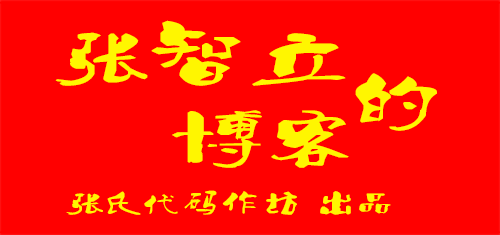
<style>
.page{position:relative;width:500px;height:235px;background:#ff0000}
.page>*{position:absolute;margin:0}
.t1{font:60px "Ò¶¸ùÓÑÌØÉ«¼òÌåÉý¼¶°æ";letter-spacing:0.1em;color:#fff600;scale:1.5 1}
.t2{font:24px "Ò¶¸ùÓÑÌØÉ«¼òÌåÉý¼¶°æ";letter-spacing:0.1em;color:#fff600;scale:1.5 1}
</style>
<div class="page">
<p class="t1" style="left:55px;top:20px;width:291px;height:66px">张智立</p>
<p class="t1" style="left:355px;top:73px;width:82px;height:58px">的</p>
<p class="t1" style="left:172px;top:110px;width:177px;height:58px">博客</p>
<p class="t2" style="left:66px;top:190px;width:325px;height:25px">张氏代码作坊 出品</p>
</div>
